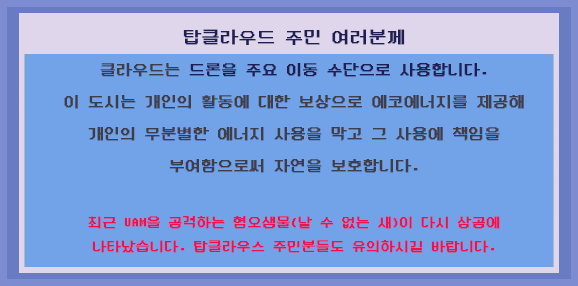
<style>
.page{position:relative;width:578px;height:286px;background:#72a2e7}
.page>*{position:absolute;margin:0}
.t1{font:15.7px/32px "DungGeunMo";color:#3a3e4f;font-weight:bold}
.t2{font:16px/32px "DungGeunMo";color:#3a3e4f;font-weight:bold}
.t3{font:18px/32px "DungGeunMo";color:#16225e;font-weight:bold}
.t4{font:15.7px/32px "DungGeunMo";color:#16225e;font-weight:bold}
.t5{font:14px/24px "DungGeunMo";color:#f1104a;font-weight:bold}
</style>
<div class="page">
<p class="t1" style="left:64px;top:29px;width:460px;height:224px"><span class="t2"><br><br><br><br></span><span class="t3">탑클라우드 주민 여러분께<br></span>클라우드는 <span class="t4">드론을 주요 이동 수단으로 사용합니다.<br></span>이 도시는 개인의 활동에 대한 보상으로 에코에너지를 제공해<br>개인의 무분별한 에너지 사용을 막고 그 사용에 책임을 부여함으로써 자연을 보호합니다.<br><br><span class="t5">최근 UAM을 공격하는 혐오생물(날 수 없는 새)이 다시 상공에 나타났습니다. 탑클라우스 주민분들도 유의하시길 바랍니다.</span></p>
</div>
